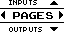
<style>
.page{position:relative;width:64px;height:32px;background:#ffffff}
.page>*{position:absolute;margin:0}
.t1{font:8px "04b03";color:#000000;scale:1.06 1}
.t2{font:14px "ArcadeClassic";color:#000000;scale:1.05 1}
</style>
<div class="page">
<p class="t1" style="left:9px;top:0px;width:28px;height:5px">INPUTS</p>
<p class="t2" style="left:13px;top:12px;width:40px;height:7px">PAGES</p>
<p class="t1" style="left:9px;top:27px;width:33px;height:5px">OUTPUTS</p>
</div>
